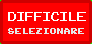
<style>
.page{position:relative;width:92px;height:44px;background:#ff0000}
.page>*{position:absolute;margin:0}
.t1{font:17px "ArcadeClassic";color:#ffffff}
.t2{font:12.4px "ArcadeClassic";color:#e6e6e6;scale:0.97 1}
</style>
<div class="page">
<p class="t1" style="left:8px;top:12px;width:78px;height:9px">difficile</p>
<p class="t2" style="left:8px;top:28px;width:76px;height:6px">selezionare</p>
</div>
